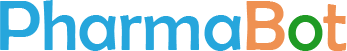
<style>
.page{position:relative;width:347px;height:51px;background:#ffffff}
.page>*{position:absolute;margin:0}
.t1{font:72px "BerlinSansFB-Reg";color:#26a6dc}
.t2{font:72px "BerlinSansFB-Reg";color:#ef9152}
.t3{font:72px "BerlinSansFB-Reg";color:#209b25}
</style>
<div class="page">
<p class="t1" style="left:0px;top:0px;width:347px;height:51px">Pharma<span class="t2">B</span><span class="t3">o</span><span class="t2">t</span></p>
</div>
